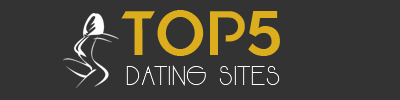
<style>
.page{position:relative;width:400px;height:100px;background:#333333}
.page>*{position:absolute;margin:0}
.t1{font:60px "CaptainMarvel";color:#dcae1d;text-transform:uppercase}
.t2{font:28px "Moodyrock";letter-spacing:0.01em;color:#fffbfb;text-transform:uppercase}
</style>
<div class="page">
<p class="t1" style="left:121px;top:10px;width:159px;height:46px">TOP5</p>
<p class="t2" style="left:126px;top:65px;width:154px;height:21px">dating sites</p>
</div>
